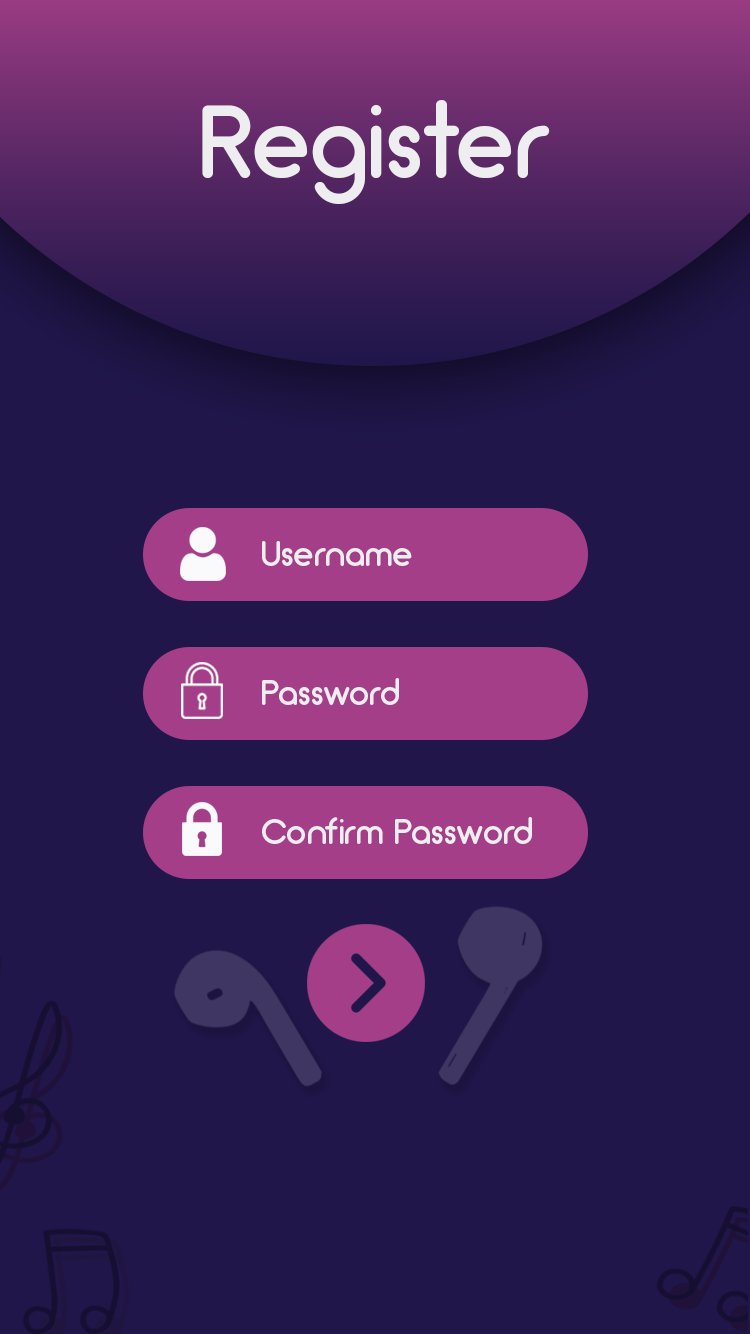
<style>
.page{position:relative;width:750px;height:1334px;background:#20164a}
.page>*{position:absolute;margin:0}
.t1{font:104.3px "Arciform";color:#eeeef0}
.t2{font:36px "Arciform";color:#eeeef0}
</style>
<div class="page">
<p class="t1" style="left:202px;top:100px;width:348px;height:104px">Register</p>
<p class="t2" style="left:262px;top:541px;width:150px;height:25px">Username</p>
<p class="t2" style="left:262px;top:678px;width:137px;height:27px">Password</p>
<p class="t2" style="left:262px;top:817px;width:270px;height:27px">Confirm Password</p>
</div>
